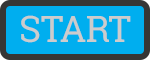
<style>
.page{position:relative;width:150px;height:60px;background:#00aeef}
.page>*{position:absolute;margin:0}
.t1{font:36.6px "RobotoSlab-Regular";letter-spacing:-0.01em;color:#cccccc}
</style>
<div class="page">
<p class="t1" style="left:21px;top:15px;width:110px;height:28px">START</p>
</div>
